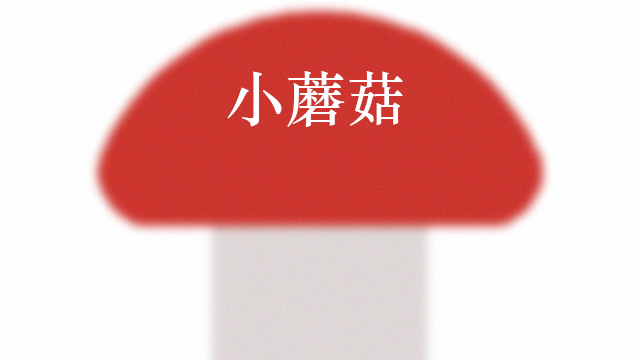
<style>
.page{position:relative;width:640px;height:360px}
.page>*{position:absolute;margin:0}
.t1{font:60px "STZhongsong";color:#ffffff}
</style>
<div class="page">
<p class="t1" style="left:227px;top:71px;width:176px;height:56px">小蘑菇</p>
</div>
